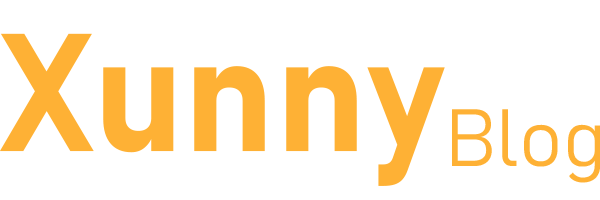
<style>
.page{position:relative;width:600px;height:200px;background:#ffffff}
.page>*{position:absolute;margin:0}
.t1{font:164.9px "Bahnschrift-Bold";color:#feb135}
.t2{font:80px "Bahnschrift-Light";color:#feb135}
</style>
<div class="page">
<p class="t1" style="left:0px;top:33px;width:445px;height:153px">Xunny</p>
<p class="t2" style="left:452px;top:109px;width:149px;height:74px">Blog</p>
</div>
